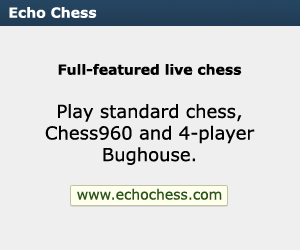
<style>
.page{position:relative;width:300px;height:250px;background:#efefef}
.page>*{position:absolute;margin:0}
.t1{font:14px "Verdana-Bold";color:#ffffff}
.t2{font:18px "Verdana";color:#000000}
.t3{font:14px "Verdana-Bold";color:#000000}
.t4{font:14px "Verdana";color:#295318}
</style>
<div class="page">
<p class="t1" style="left:9px;top:7px;width:88px;height:11px">Echo Chess</p>
<p class="t2" style="left:45px;top:63px;width:210px;height:137px;text-align:center"><span class="t3">Full-featured live chess<br></span><br>Play standard chess, Chess960 and 4-player Bughouse.<br><br><span class="t4">www.echochess.com</span></p>
</div>
